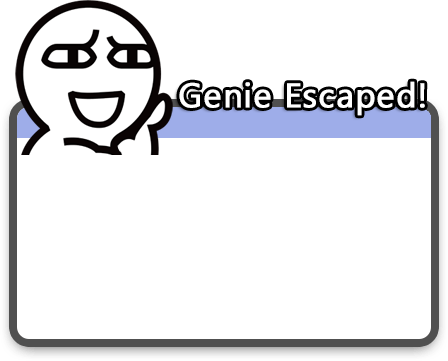
<style>
.page{position:relative;width:448px;height:361px;background:#ffffff}
.page>*{position:absolute;margin:0}
.t1{font:34px "MicrosoftPhagsPa";letter-spacing:0.02em;color:#ffffff;font-weight:bold}
</style>
<div class="page">
<p class="t1" style="left:179px;top:81px;width:246px;height:35px">Genie Escaped!</p>
</div>
